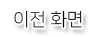
<style>
.page{position:relative;width:95px;height:37px;background:#ffffff}
.page>*{position:absolute;margin:0}
.t1{font:18px "NanumSquareL";color:#000000}
</style>
<div class="page">
<p class="t1" style="left:14px;top:10px;width:68px;height:18px">이전 화면</p>
</div>
